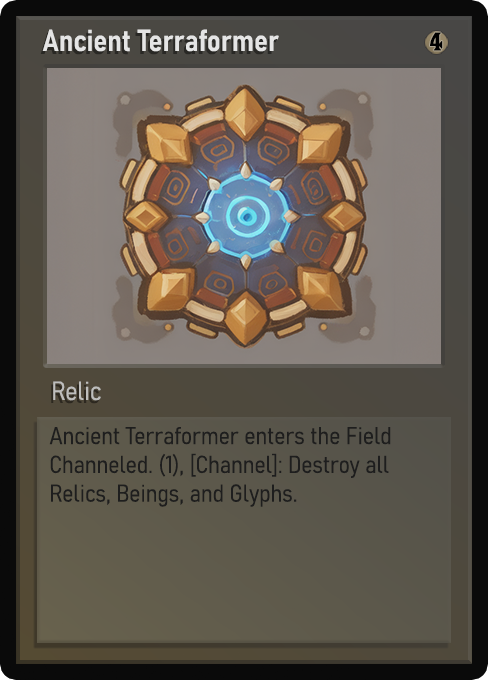
<style>
.page{position:relative;width:488px;height:680px}
.page>*{position:absolute;margin:0}
.t1{font:30px "Bahnschrift-SemiBoldSemiCondensed";color:#f2f2f2;font-weight:bold}
.t2{font:25px "WTRRoycroft";color:#000000;font-weight:bold;scale:1.09 1}
.t3{font:26px "Bahnschrift-LightSemiCondensed";color:#c8c8c8;font-weight:bold}
.t4{font:24px "Bahnschrift-LightSemiCondensed";color:#1e1e1e;font-weight:bold}
</style>
<div class="page">
<p class="t1" style="left:42px;top:29px;width:237px;height:23px;opacity:0.9">Ancient Terraformer</p>
<p class="t2" style="left:430px;top:32px;width:13px;height:19px">4</p>
<p class="t3" style="left:53px;top:381px;width:48px;height:20px;opacity:0.9">Relic</p>
<p class="t4" style="left:49px;top:427px;width:342px;height:80px">Ancient Terraformer enters the Field Channeled. (1), [Channel]: Destroy all Relics, Beings, and Glyphs.</p>
</div>
